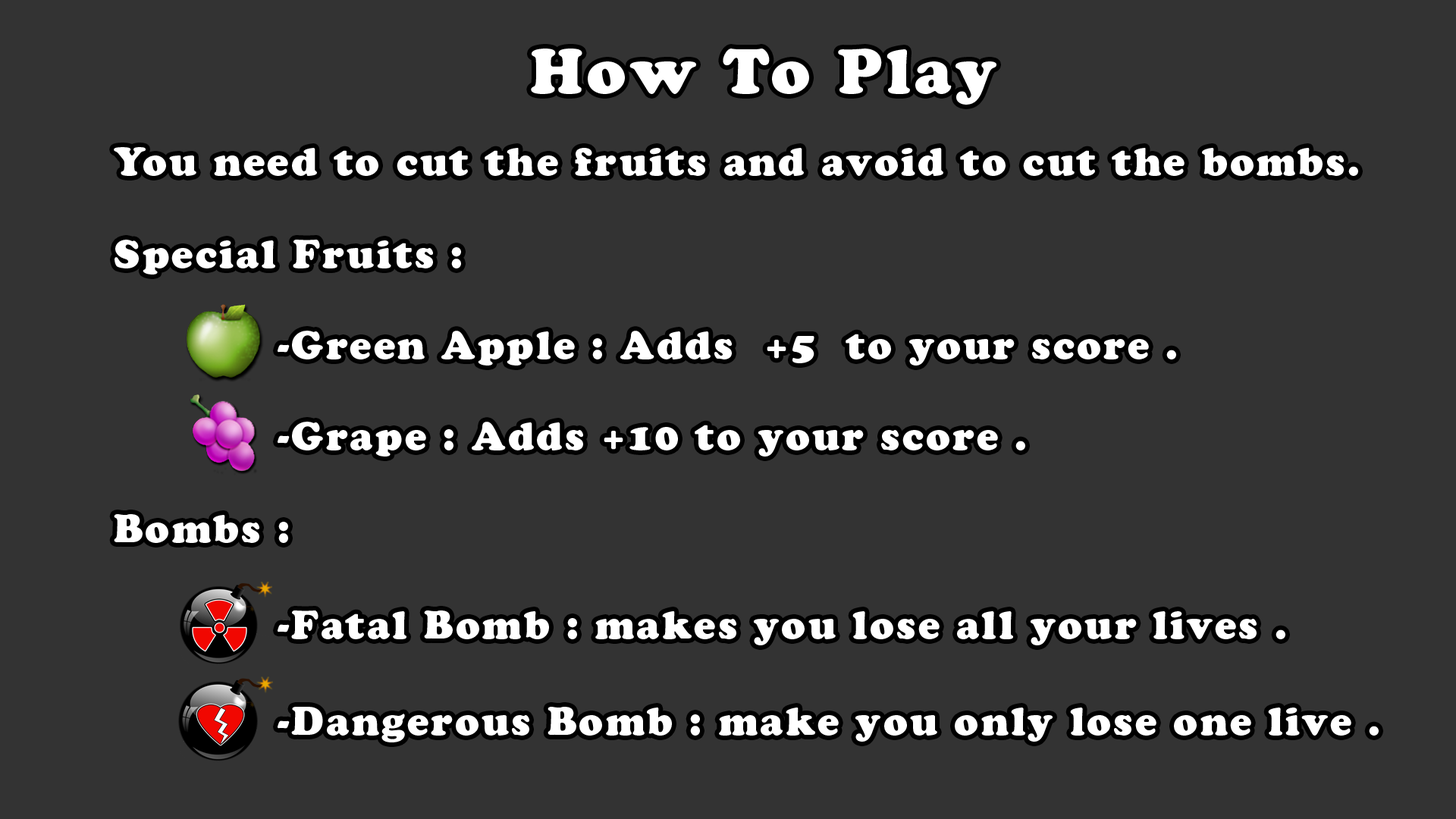
<style>
.page{position:relative;width:1456px;height:819px;background:#333333}
.page>*{position:absolute;margin:0}
.t1{font:62.9px "CooperBlackStd";letter-spacing:0.06em;color:#ffffff}
.t2{font:38.6px/96.3px "CooperBlackStd";letter-spacing:0.06em;color:#ffffff}
.t3{font:38.6px "CooperBlackStd";letter-spacing:0.06em;color:#ffffff}
.t4{font:38.6px/91px "CooperBlackStd";letter-spacing:0.06em;color:#ffffff}
</style>
<div class="page">
<p class="t1" style="left:531px;top:49px;width:465px;height:56px">How To Play</p>
<p class="t2" style="left:114px;top:147px;width:1265px;height:595px"><span class="t3">You need to cut the fruits and avoid to cut the bombs.<br><br>Special Fruits :<br></span><span class="t4">      -Green Apple : Adds  +5  to your score .<br>      -Grape : Adds +10 to your score .<br></span><span class="t3"><br>Bombs :<br></span>      -Fatal Bomb : makes you lose all your lives .<br>      -Dangerous Bomb : make you only lose one live .</p>
</div>
